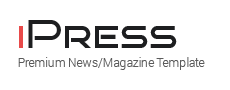
<style>
.page{position:relative;width:230px;height:90px;background:#ffffff}
.page>*{position:absolute;margin:0}
.t1{font:40px "BrunoAceSC-Regular";color:#1d1e20}
.t2{font:40px "BrunoAceSC-Regular";color:#e84a4a}
.t3{font:12px "Roboto-Light";color:#5b5b5b}
</style>
<div class="page">
<p class="t1" style="left:19px;top:20px;width:158px;height:28px"><span class="t2">i</span>Press</p>
<p class="t3" style="left:18px;top:57px;width:187px;height:13px">Premium News/Magazine Template</p>
</div>
